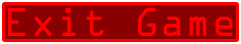
<style>
.page{position:relative;width:241px;height:44px;background:#880000}
.page>*{position:absolute;margin:0}
.t1{font:36px "OCRAStd";color:#ff0000}
</style>
<div class="page">
<p class="t1" style="left:8px;top:8px;width:225px;height:28px">Exit Game</p>
<p class="t1" style="left:8px;top:8px;width:225px;height:28px">Exit Game</p>
</div>
